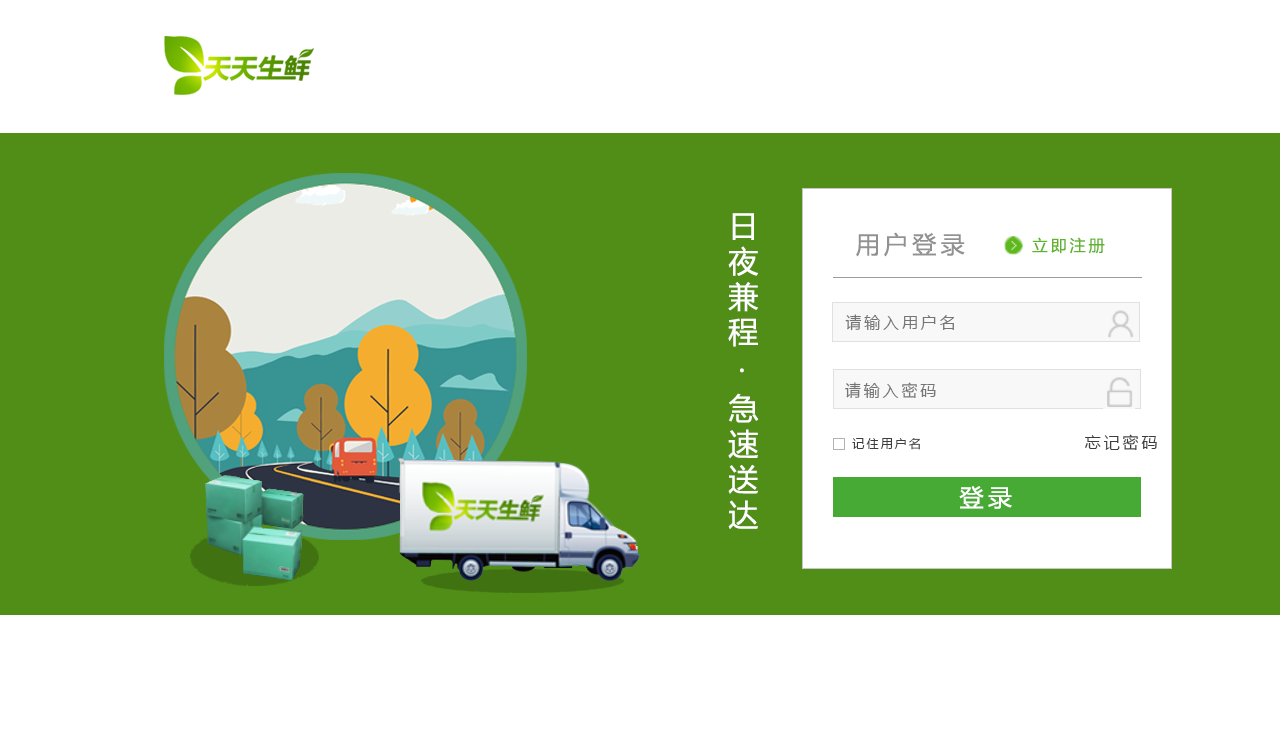
<style>
.page{position:relative;width:1280px;height:729px;background:#ffffff}
.page>*{position:absolute;margin:0}
.t1{font:30px/36px "MicrosoftYaHei";letter-spacing:0.18em;color:#ffffff}
.t2{font:24px "MicrosoftYaHei";letter-spacing:0.18em;color:#929191}
.t3{font:16px "MicrosoftYaHei";letter-spacing:0.18em;color:#5fb42a}
.t4{font:16px "MicrosoftYaHei";letter-spacing:0.18em;color:#757575}
.t5{font:12px "MicrosoftYaHei";letter-spacing:0.18em;color:#3e3d3d}
.t6{font:16px "MicrosoftYaHei";letter-spacing:0.18em;color:#3e3d3d}
.t7{font:24px "MicrosoftYaHei";letter-spacing:0.18em;color:#ffffff}
</style>
<div class="page">
<p class="t1" style="left:728px;top:213px;width:31px;height:316px">日夜兼程 · 急速送达</p>
<p class="t2" style="left:856px;top:232px;width:109px;height:25px">用户登录</p>
<p class="t3" style="left:1032px;top:237px;width:73px;height:17px">立即注册</p>
<p class="t4" style="left:845px;top:314px;width:109px;height:17px">请输入用户名</p>
<p class="t4" style="left:845px;top:382px;width:91px;height:16px">请输入密码</p>
<p class="t5" style="left:852px;top:438px;width:68px;height:12px">记住用户名</p>
<p class="t6" style="left:1085px;top:434px;width:72px;height:16px">忘记密码</p>
<p class="t7" style="left:959px;top:486px;width:53px;height:23px">登录</p>
</div>
